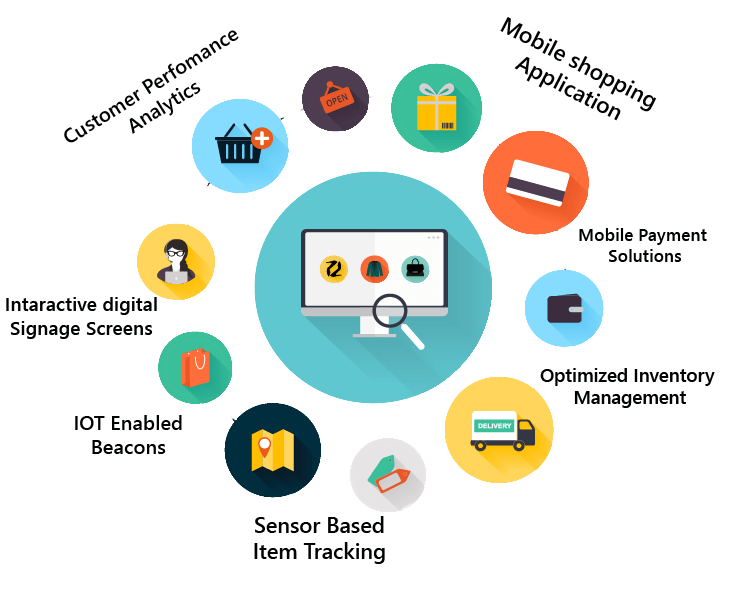
<style>
.page{position:relative;width:740px;height:590px;background:#ffffff}
.page>*{position:absolute;margin:0}
.t1{font:22.4px "SegoeUI-Semibold";color:#000201}
.t2{font:20.1px "SegoeUI-Semibold";color:#000201}
.t3{font:17.4px "SegoeUI-Semibold";color:#000201}
.t4{font:19.3px "SegoeUI-Semibold";color:#000201}
.t5{font:18.6px "SegoeUI-Semibold";color:#000201}
.t6{font:21.7px "SegoeUI-Semibold";color:#000201}
</style>
<div class="page">
<p class="t1" style="left:500px;top:17px;width:157px;height:104px;text-align:center;rotate:27deg">Mobile shopping <br>Application</p>
<p class="t2" style="left:64px;top:30px;width:175px;height:113px;text-align:center;rotate:-32deg">Customer Perfomance<br>Analytics</p>
<p class="t3" style="left:579px;top:228px;width:128px;height:34px;text-align:center">Mobile Payment<br> Solutions</p>
<p class="t4" style="left:6px;top:297px;width:151px;height:42px;text-align:center">Intaractive digital<br>Signage Screens</p>
<p class="t5" style="left:540px;top:368px;width:175px;height:40px;text-align:center">Optimized Inventory<br> Management</p>
<p class="t2" style="left:75px;top:415px;width:107px;height:39px;text-align:center">IOT Enabled<br>Beacons</p>
<p class="t6" style="left:254px;top:516px;width:131px;height:48px;text-align:center">Sensor Based<br>Item Tracking</p>
</div>
